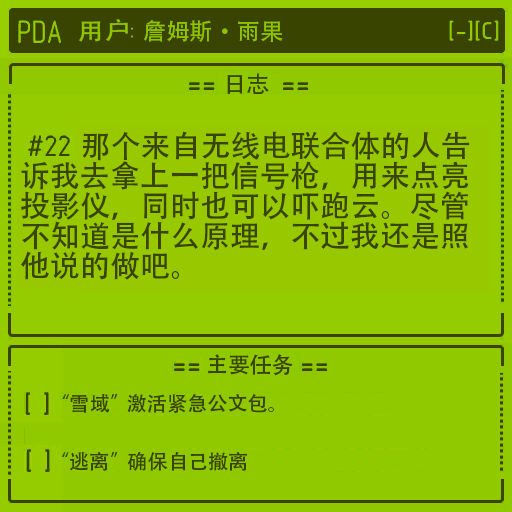
<style>
.page{position:relative;width:512px;height:512px;background:#90c900}
.page>*{position:absolute;margin:0}
.t1{font:30px/30px "AdobeHeitiStd-Regular";color:#384400}
</style>
<div class="page">
<p class="t1" style="left:21px;top:131px;width:449px;height:149px">那个来自无线电联合体的人告<br>诉我去拿上一把信号枪，用来点亮<br>投影仪，同时也可以吓跑云。尽管<br>不知道是什么原理，不过我还是照<br>他说的做吧。</p>
</div>
